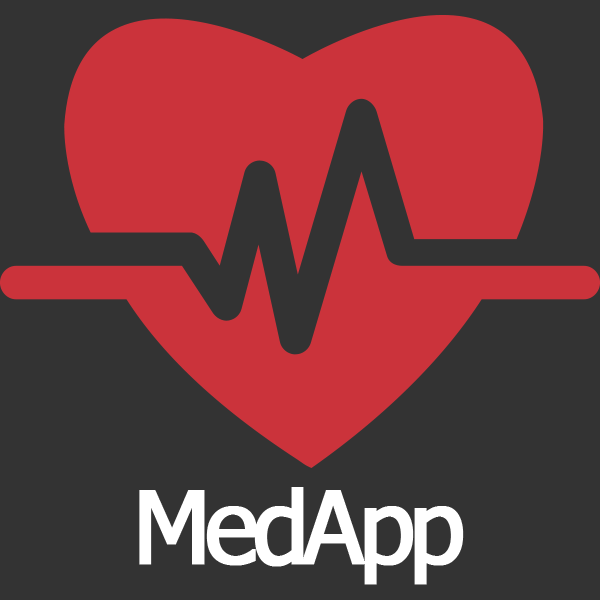
<style>
.page{position:relative;width:600px;height:600px;background:#333333}
.page>*{position:absolute;margin:0}
.t1{font:100px "Tahoma";letter-spacing:-0.075em;color:#ffffff;font-weight:bold}
</style>
<div class="page">
<p class="t1" style="left:139px;top:487px;width:325px;height:98px">MedApp</p>
</div>
